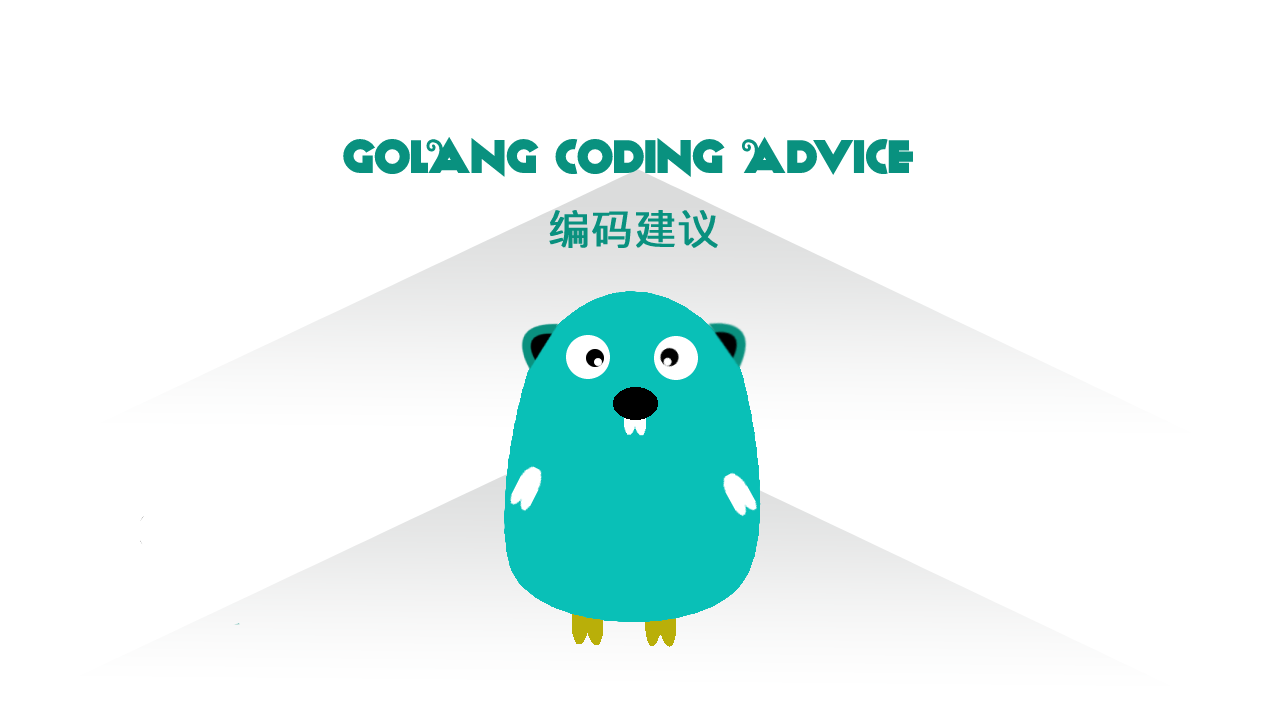
<style>
.page{position:relative;width:1280px;height:720px;background:#ffffff}
.page>*{position:absolute;margin:0}
.t1{font:48px "Anagram";color:#09917f}
.t2{font:42px "DroidSansFallback";color:#09917f;font-weight:bold}
</style>
<div class="page">
<p class="t1" style="left:343px;top:136px;width:570px;height:41px">GOLANG CODING ADVICE</p>
<p class="t2" style="left:549px;top:209px;width:169px;height:39px">编码建议</p>
</div>
